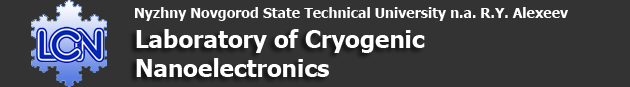
<style>
.page{position:relative;width:630px;height:87px;background:#333333}
.page>*{position:absolute;margin:0}
.t1{font:14px "Tahoma-Bold";color:#ffffff}
.t2{font:24px "Tahoma-Bold";color:#ffffff}
</style>
<div class="page">
<p class="t1" style="left:135px;top:7px;width:433px;height:14px">Nyzhny Novgorod State Technical University n.a. R.Y. Alexeev</p>
<p class="t2" style="left:136px;top:29px;width:289px;height:48px">Laboratory of Cryogenic <br>Nanoelectronics</p>
</div>
